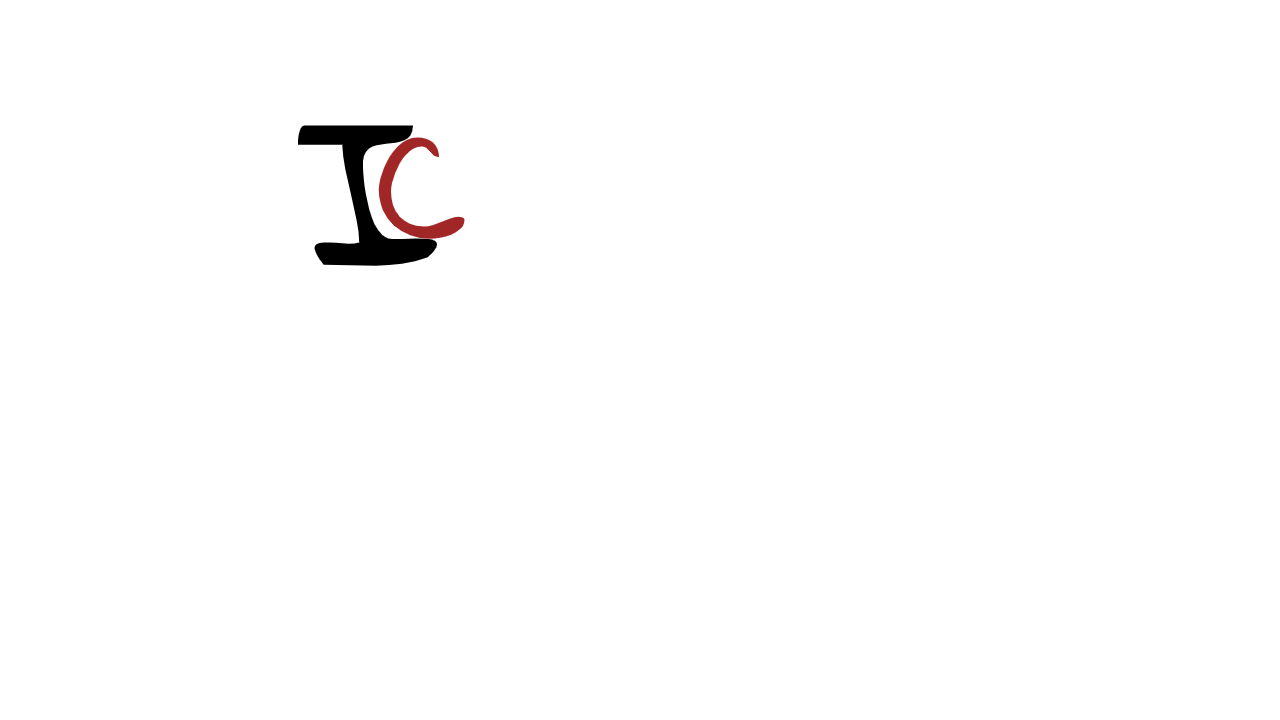
<style>
.page{position:relative;width:1280px;height:720px;background:#ffffff}
.page>*{position:absolute;margin:0}
.t1{font:203px "GloriaHallelujah";color:#000000}
.t2{font:146px "GloriaHallelujah";color:#a12727}
</style>
<div class="page">
<p class="t1" style="left:298px;top:125px;width:140px;height:141px">I</p>
<p class="t2" style="left:378px;top:137px;width:87px;height:102px">C</p>
</div>
